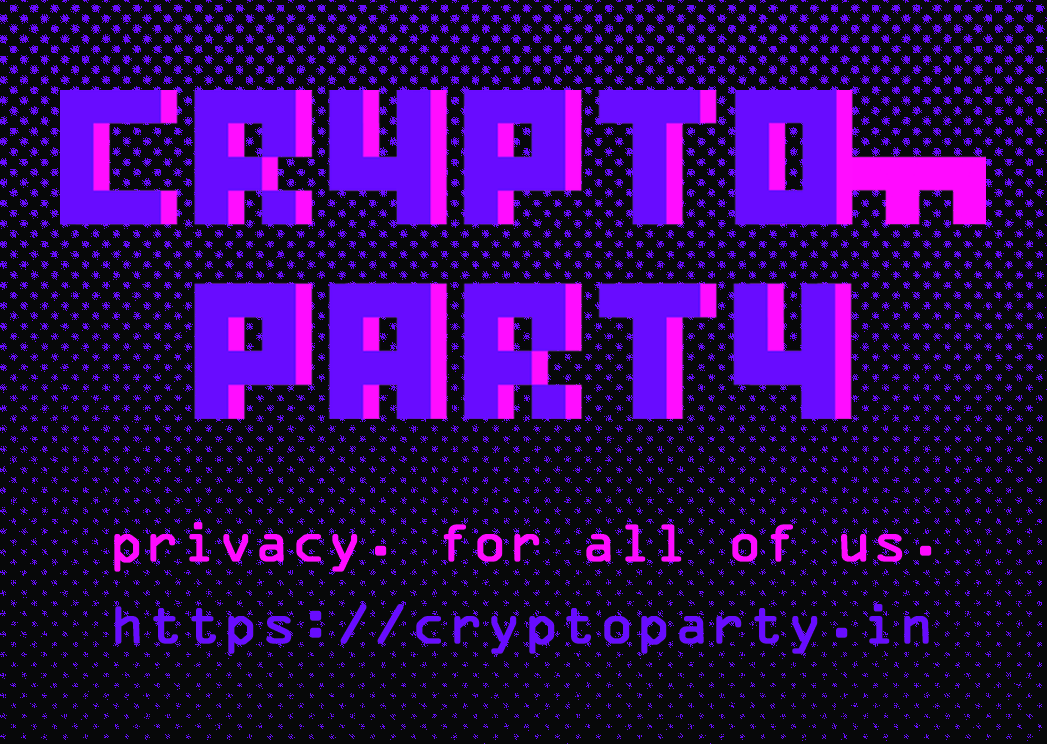
<style>
.page{position:relative;width:1047px;height:744px;background:#070809}
.page>*{position:absolute;margin:0}
.t1{font:49.6px/41.4px "OCRAStd";letter-spacing:-0.015em;color:#ff0bff;font-weight:bold}
.t2{font:49.6px/41.4px "OCRAStd";letter-spacing:0.01em;color:#680cff;font-weight:bold}
</style>
<div class="page">
<p class="t1" style="left:114px;top:522px;width:818px;height:132px;text-align:center">privacy. for all of us.<br><br><span class="t2">https://cryptoparty.in</span></p>
</div>
